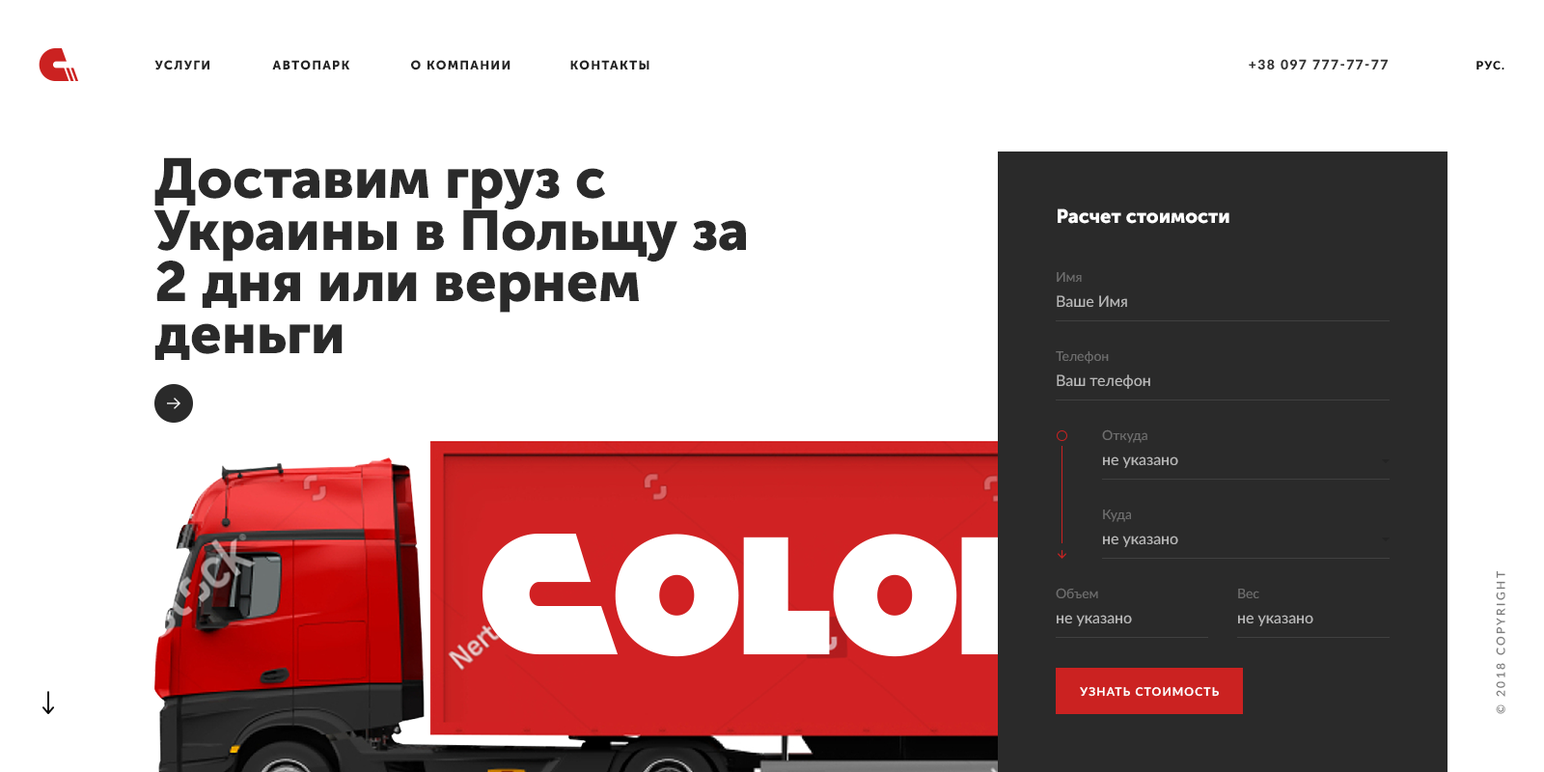
<style>
.page{position:relative;width:1544px;height:772px;background:#ffffff}
.page>*{position:absolute;margin:0}
.t1{font:12.5px "MuseoSansCyrl-900";letter-spacing:0.1em;color:#242424;text-transform:uppercase}
.t2{font:13.5px "Lato-Black";letter-spacing:0.1em;color:#333333;text-transform:uppercase}
.t3{font:11.5px "Lato-Black";letter-spacing:0.1em;color:#141414;text-transform:uppercase}
.t4{font:55.8px/51.9px "MuseoSansCyrl-900";color:#2a2a2a}
.t5{font:19.2px "MuseoSansCyrl-900";color:#ffffff}
.t6{font:13.5px "Lato-Medium";color:#6e6e6e}
.t7{font:15.4px "Lato-Medium";color:#b7b7b7}
.t8{font:11.5px "Lato-Medium";letter-spacing:0.2em;color:#7c7c7c;text-transform:uppercase}
.t9{font:11.5px "Lato-Bold";letter-spacing:0.1em;color:#ffffff;text-transform:uppercase}
</style>
<div class="page">
<p class="t1" style="left:154px;top:60px;width:55px;height:10px">Услуги</p>
<p class="t1" style="left:272px;top:60px;width:78px;height:10px">Автопарк</p>
<p class="t1" style="left:411px;top:60px;width:100px;height:10px">О компании</p>
<p class="t1" style="left:570px;top:60px;width:80px;height:10px">Контакты</p>
<p class="t2" style="left:1249px;top:59px;width:139px;height:10px">+38 097 777-77-77</p>
<p class="t3" style="left:1477px;top:61px;width:28px;height:9px">Рус.</p>
<p class="t4" style="left:153px;top:157px;width:593px;height:203px">Доставим груз с Украины в Польщу за 2 дня или вернем деньги</p>
<p class="t5" style="left:1058px;top:208px;width:172px;height:16px">Расчет стоимости</p>
<p class="t6" style="left:1057px;top:272px;width:25px;height:10px">Имя</p>
<p class="t7" style="left:1057px;top:295px;width:70px;height:13px">Ваше Имя</p>
<p class="t6" style="left:1056px;top:351px;width:53px;height:13px">Телефон</p>
<p class="t7" style="left:1057px;top:374px;width:94px;height:15px">Ваш телефон</p>
<p class="t6" style="left:1102px;top:430px;width:46px;height:13px">Откуда</p>
<p class="t7" style="left:1103px;top:457px;width:75px;height:11px">не указано</p>
<p class="t6" style="left:1103px;top:510px;width:28px;height:12px">Куда</p>
<p class="t7" style="left:1103px;top:536px;width:75px;height:11px">не указано</p>
<p class="t8" style="left:1496px;top:570px;width:10px;height:144px;rotate:-90deg">© 2018 Copyright</p>
<p class="t6" style="left:1056px;top:588px;width:42px;height:10px">Объем</p>
<p class="t6" style="left:1238px;top:589px;width:22px;height:9px">Вес</p>
<p class="t7" style="left:1057px;top:615px;width:75px;height:11px">не указано</p>
<p class="t7" style="left:1238px;top:615px;width:76px;height:11px">не указано</p>
<p class="t9" style="left:1080px;top:687px;width:139px;height:10px">Узнать стоимость</p>
</div>
